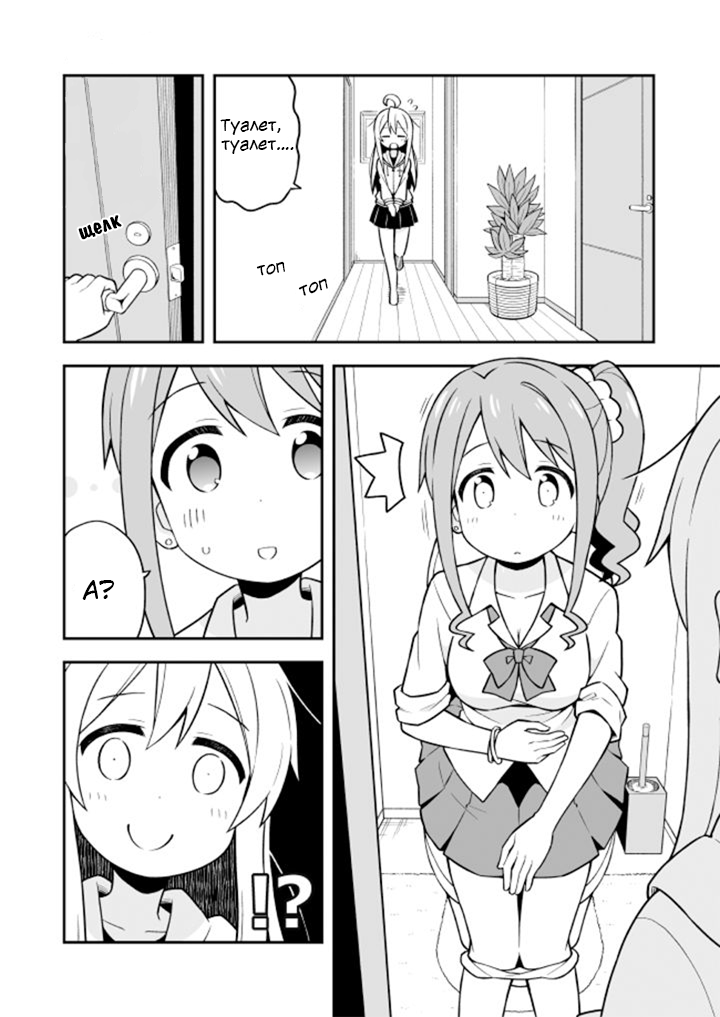
<style>
.page{position:relative;width:720px;height:1017px;background:#ffffff}
.page>*{position:absolute;margin:0}
.t1{font:16px "KuraiVoice2";color:#000000}
.t2{font:24px "ADomInoBold";color:#000000}
.t3{font:16px "KuraiVoice2";color:#000000;scale:1.04 1}
.t4{font:24px "KuraiVoice2";color:#000000}
</style>
<div class="page">
<p class="t1" style="left:220px;top:119px;width:74px;height:35px;text-align:center">Туалет,<br>  туалет….</p>
<p class="t2" style="left:78px;top:215px;width:44px;height:25px;rotate:-20deg">щелк</p>
<p class="t1" style="left:256px;top:261px;width:29px;height:15px;rotate:-9deg">топ</p>
<p class="t3" style="left:298px;top:278px;width:30px;height:18px;rotate:-17deg">топ</p>
<p class="t4" style="left:82px;top:580px;width:33px;height:20px">А?</p>
</div>
